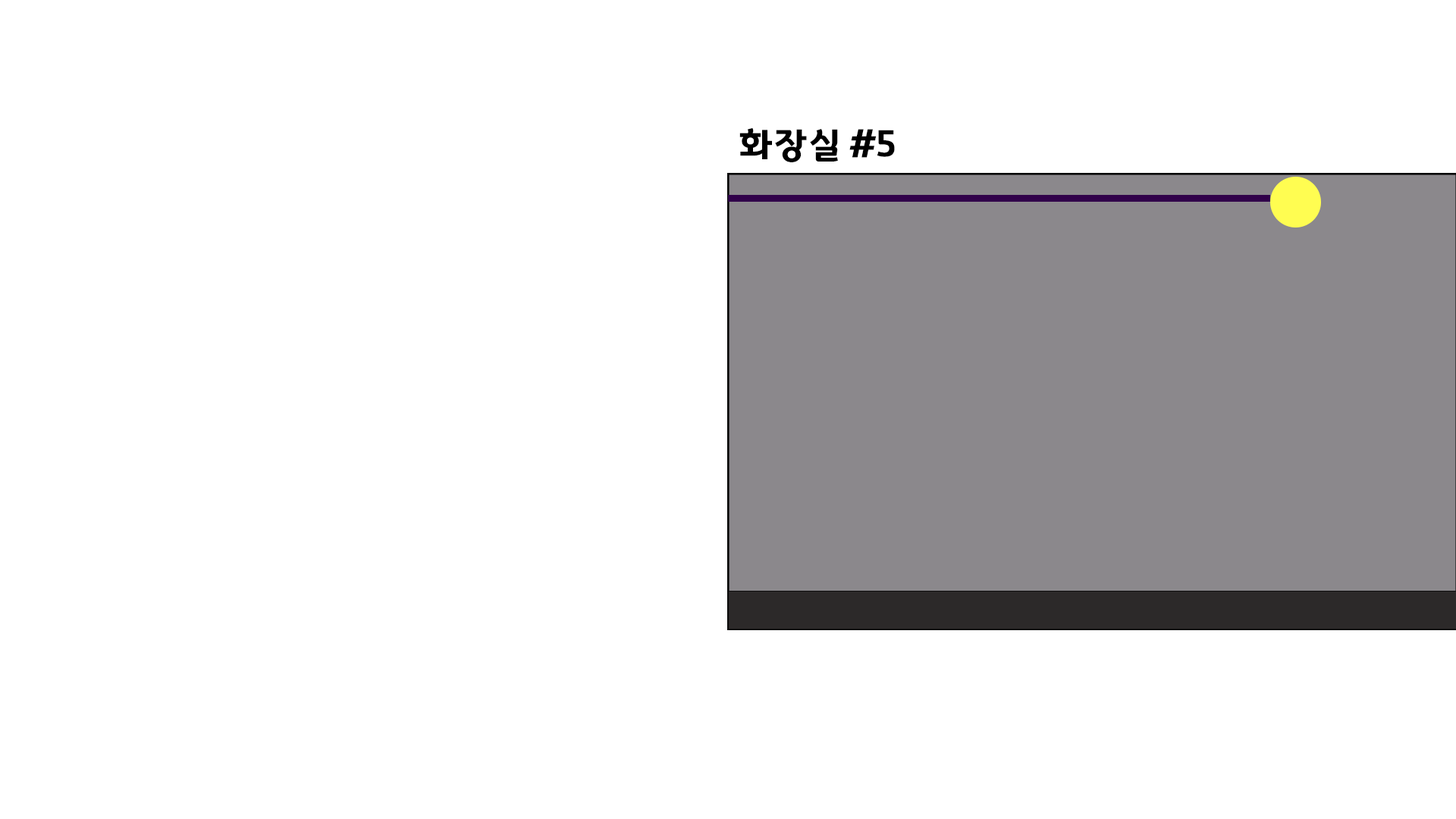
<style>
.page{position:relative;width:1456px;height:819px;background:#ffffff}
.page>*{position:absolute;margin:0}
.t1{font:36.4px "GyeonggiTitleV";letter-spacing:-0.05em;color:#000000}
</style>
<div class="page">
<p class="t1" style="left:739px;top:127px;width:156px;height:35px">화장실 #5</p>
</div>
